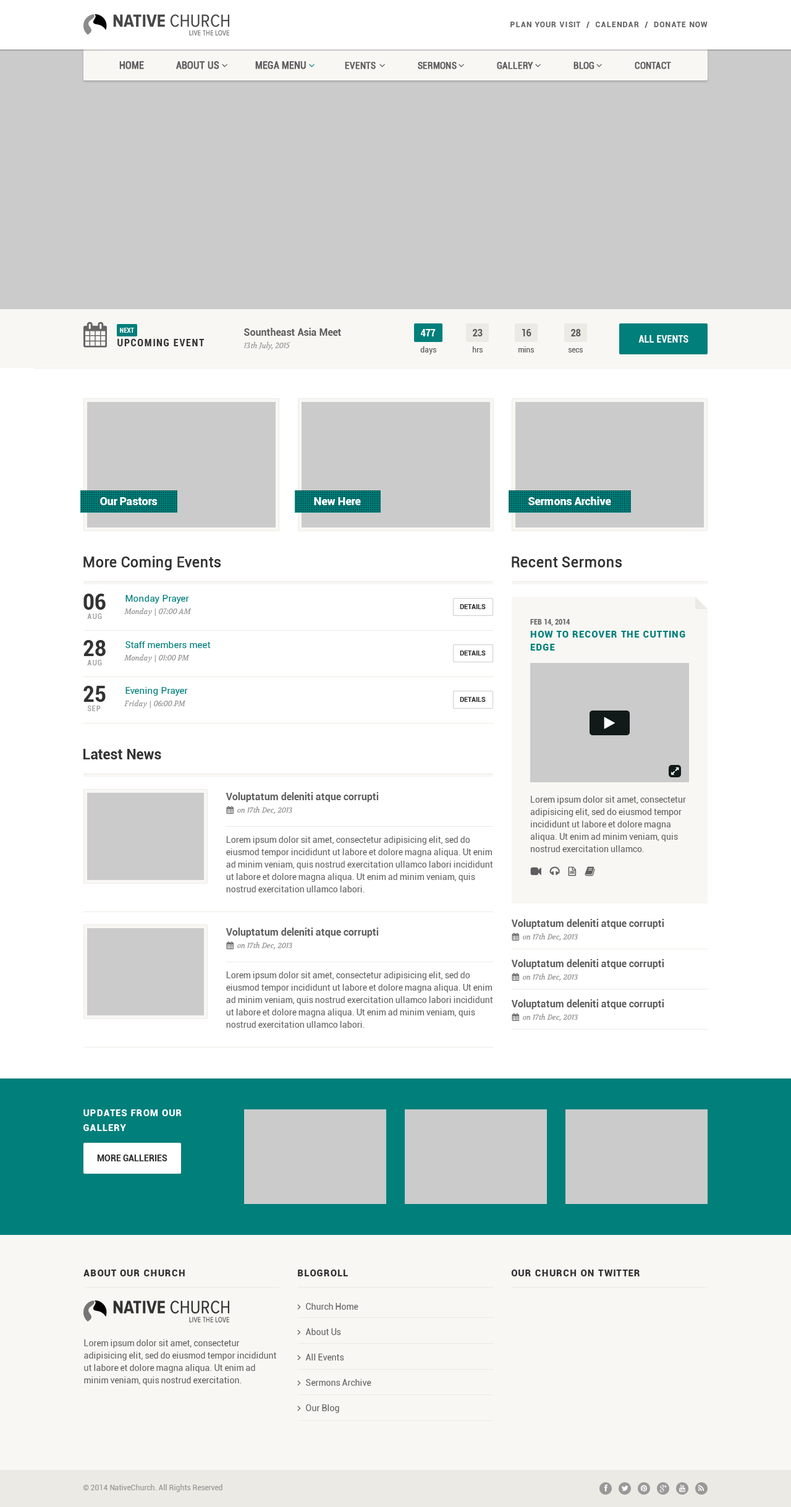
<style>
.page{position:relative;width:791px;height:1507px;background:#ffffff}
.page>*{position:absolute;margin:0}
.t1{font:7.4px "Roboto-Bold";letter-spacing:0.1em;color:#5e5e5e}
.t2{font:6.8px "Roboto-BoldCondensed";color:#ffffff}
.t3{font:9.9px "Roboto-Bold";color:#5e5e5e}
.t4{font:9.9px "Roboto-BoldCondensed";color:#ffffff}
.t5{font:9.9px "Roboto-BoldCondensed";color:#5e5e5e}
.t6{font:9.9px "Roboto-BoldCondensed";letter-spacing:0.1em;color:#333333}
.t7{font:7.4px "Volkhov-Italic";color:#999999}
.t8{font:7.4px "Roboto-Regular";color:#5e5e5e}
.t9{font:11.1px "Roboto-Black";color:#ffffff}
.t10{font:14.2px "Roboto-Regular";color:#333333;font-weight:bold}
.t11{font:22.3px "Roboto-BoldCondensed";color:#333333}
.t12{font:9.3px "Roboto-Regular";color:#007f7b}
.t13{font:6.8px "Roboto-Bold";color:#333333}
.t14{font:7.4px "Roboto-Condensed";letter-spacing:0.1em;color:#999999}
.t15{font:7.4px "Roboto-BoldCondensed";color:#666666}
.t16{font:9.3px/13px "Roboto-Black";letter-spacing:0.075em;color:#007f7b}
.t17{font:14.2px "Roboto-Bold";color:#333333}
.t18{font:8.7px/12.4px "Roboto-Regular";color:#666666}
.t19{font:9.3px/14.8px "Roboto-Black";letter-spacing:0.075em;color:#ffffff}
.t20{font:8.7px "Roboto-Bold";color:#333333}
.t21{font:9.3px "Roboto-Black";letter-spacing:0.075em;color:#333333}
.t22{font:7.4px "Roboto-Regular";color:#999999}
</style>
<div class="page">
<p class="t1" style="left:511px;top:22px;width:197px;height:6px">PLAN YOUR VISIT  /  CALENDAR  /  DONATE NOW</p>
<p class="t2" style="left:120px;top:328px;width:14px;height:5px">NEXT</p>
<p class="t3" style="left:244px;top:328px;width:97px;height:8px">Sountheast Asia Meet</p>
<p class="t4" style="left:420px;top:329px;width:16px;height:7px">477</p>
<p class="t5" style="left:473px;top:329px;width:10px;height:7px">23</p>
<p class="t5" style="left:522px;top:329px;width:10px;height:7px">16</p>
<p class="t5" style="left:571px;top:329px;width:10px;height:7px">28</p>
<p class="t6" style="left:117px;top:339px;width:88px;height:7px">UPCOMING EVENT</p>
<p class="t7" style="left:244px;top:342px;width:47px;height:8px">13th July, 2015</p>
<p class="t4" style="left:639px;top:335px;width:50px;height:8px">ALL EVENTS</p>
<p class="t8" style="left:420px;top:346px;width:17px;height:8px">days</p>
<p class="t8" style="left:473px;top:346px;width:10px;height:6px">hrs</p>
<p class="t8" style="left:519px;top:346px;width:15px;height:6px">mins</p>
<p class="t8" style="left:568px;top:348px;width:15px;height:4px">secs</p>
<p class="t9" style="left:100px;top:497px;width:58px;height:8px">Our Pastors</p>
<p class="t9" style="left:314px;top:497px;width:47px;height:8px">New Here</p>
<p class="t9" style="left:529px;top:496px;width:82px;height:9px">Sermons Archive</p>
<p class="t10" style="left:83px;top:556px;width:138px;height:15px">More Coming Events</p>
<p class="t10" style="left:512px;top:556px;width:110px;height:12px">Recent Sermons</p>
<p class="t11" style="left:83px;top:594px;width:23px;height:16px">06</p>
<p class="t12" style="left:126px;top:595px;width:63px;height:8px">Monday Prayer</p>
<p class="t13" style="left:460px;top:604px;width:26px;height:5px">DETAILS</p>
<p class="t14" style="left:87px;top:613px;width:15px;height:6px">AUG</p>
<p class="t7" style="left:124px;top:608px;width:68px;height:8px">Monday | 07:00 AM</p>
<p class="t15" style="left:530px;top:619px;width:41px;height:7px">FEB 14, 2014</p>
<p class="t11" style="left:83px;top:640px;width:23px;height:16px">28</p>
<p class="t12" style="left:126px;top:641px;width:85px;height:7px">Staff members meet</p>
<p class="t16" style="left:530px;top:631px;width:156px;height:19px">HOW TO RECOVER THE CUTTING<br>EDGE</p>
<p class="t13" style="left:460px;top:650px;width:26px;height:5px">DETAILS</p>
<p class="t14" style="left:87px;top:660px;width:15px;height:5px">AUG</p>
<p class="t7" style="left:124px;top:654px;width:66px;height:8px">Monday | 01:00 PM</p>
<p class="t11" style="left:83px;top:686px;width:23px;height:16px">25</p>
<p class="t12" style="left:126px;top:687px;width:62px;height:9px">Evening Prayer</p>
<p class="t7" style="left:124px;top:700px;width:62px;height:8px">Friday | 06:00 PM</p>
<p class="t13" style="left:460px;top:697px;width:26px;height:5px">DETAILS</p>
<p class="t14" style="left:87px;top:705px;width:14px;height:6px">SEP</p>
<p class="t17" style="left:83px;top:749px;width:78px;height:10px">Latest News</p>
<p class="t3" style="left:226px;top:792px;width:152px;height:10px">Voluptatum deleniti atque corrupti</p>
<p class="t18" style="left:530px;top:796px;width:156px;height:56px">Lorem ipsum dolor sit amet, consectetur adipisicing elit, sed do eiusmod tempor incididunt ut labore et dolore magna aliqua. Ut enim ad minim veniam, quis nostrud exercitation ullamco.</p>
<p class="t18" style="left:226px;top:836px;width:267px;height:56px">Lorem ipsum dolor sit amet, consectetur adipisicing elit, sed do eiusmod tempor incididunt ut labore et dolore magna aliqua. Ut enim ad minim veniam, quis nostrud exercitation ullamco labori incididunt ut labore et dolore magna aliqua. Ut enim ad minim veniam, quis nostrud exercitation ullamco labori.</p>
<p class="t3" style="left:226px;top:927px;width:152px;height:10px">Voluptatum deleniti atque corrupti</p>
<p class="t3" style="left:511px;top:919px;width:153px;height:10px">Voluptatum deleniti atque corrupti</p>
<p class="t3" style="left:511px;top:959px;width:153px;height:10px">Voluptatum deleniti atque corrupti</p>
<p class="t18" style="left:226px;top:971px;width:267px;height:57px">Lorem ipsum dolor sit amet, consectetur adipisicing elit, sed do eiusmod tempor incididunt ut labore et dolore magna aliqua. Ut enim ad minim veniam, quis nostrud exercitation ullamco labori incididunt ut labore et dolore magna aliqua. Ut enim ad minim veniam, quis nostrud exercitation ullamco labori.</p>
<p class="t3" style="left:511px;top:999px;width:153px;height:10px">Voluptatum deleniti atque corrupti</p>
<p class="t19" style="left:83px;top:1109px;width:99px;height:22px">UPDATES FROM OUR<br>GALLERY</p>
<p class="t20" style="left:97px;top:1154px;width:71px;height:7px">MORE GALLERIES</p>
<p class="t21" style="left:83px;top:1269px;width:102px;height:7px">ABOUT OUR CHURCH</p>
<p class="t21" style="left:298px;top:1269px;width:50px;height:7px">BLOGROLL</p>
<p class="t21" style="left:511px;top:1269px;width:129px;height:7px">OUR CHURCH ON TWITTER</p>
<p class="t18" style="left:84px;top:1339px;width:192px;height:46px">Lorem ipsum dolor sit amet, consectetur adipisicing elit, sed do eiusmod tempor incididunt ut labore et dolore magna aliqua. Ut enim ad minim veniam, quis nostrud exercitation.</p>
<p class="t22" style="left:83px;top:1484px;width:140px;height:8px">© 2014 NativeChurch. All Rights Reserved</p>
</div>
